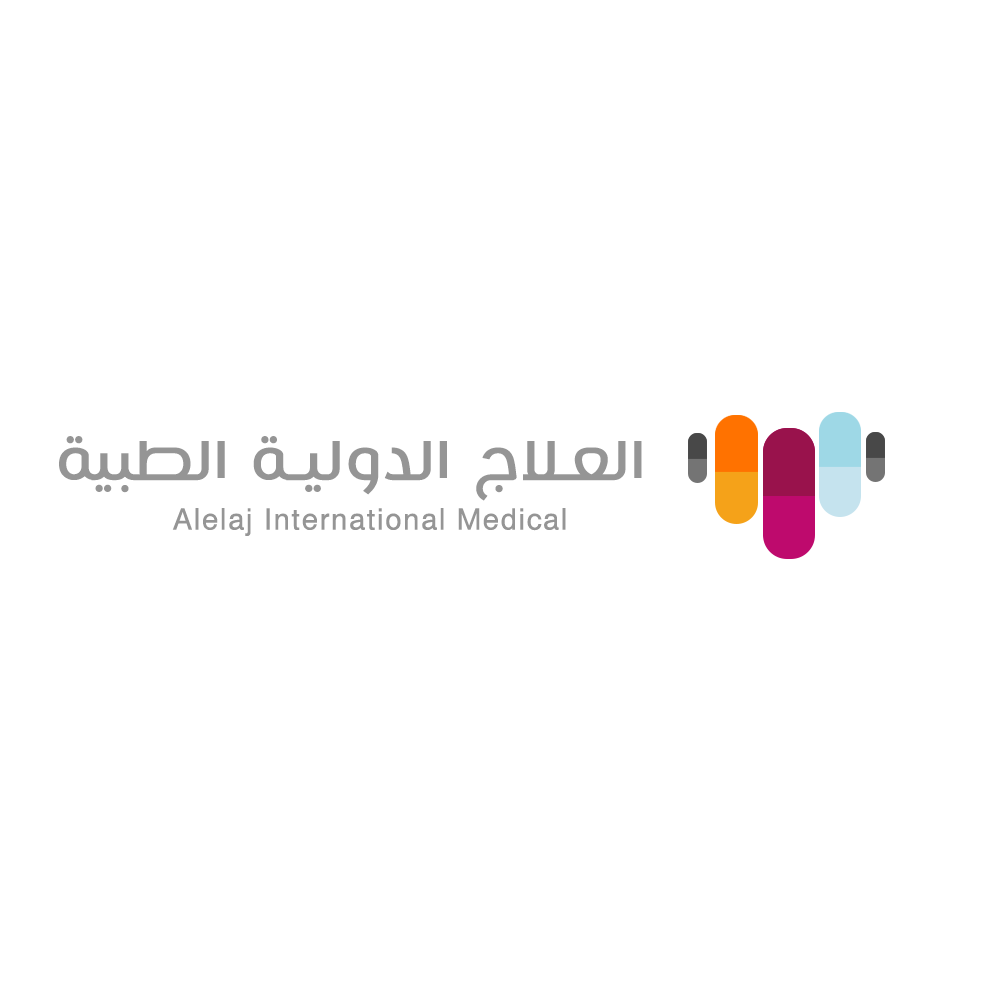
<style>
.page{position:relative;width:1000px;height:1000px;background:#ffffff}
.page>*{position:absolute;margin:0}
.t1{font:66.7px "HacenMaghrebBd";letter-spacing:0.05em;color:#959595}
.t2{font:33.5px "HacenMaghrebBd";letter-spacing:0.05em;color:#959595}
</style>
<div class="page">
<p class="t1" style="left:59px;top:436px;width:583px;height:65px">العلاج الدولية الطبية</p>
<p class="t2" style="left:172px;top:508px;width:394px;height:28px">Alelaj International Medical</p>
</div>
